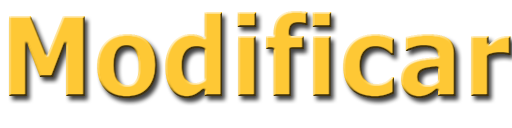
<style>
.page{position:relative;width:512px;height:128px;background:#ffffff}
.page>*{position:absolute;margin:0}
.t1{font:109.7px "Verdana-Bold";color:#fec835;scale:0.9 1}
</style>
<div class="page">
<p class="t1" style="left:9px;top:11px;width:502px;height:87px">Modificar</p>
</div>
